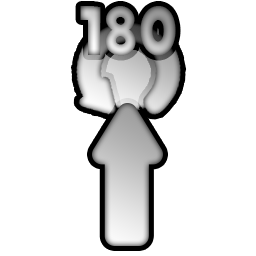
<style>
.page{position:relative;width:256px;height:256px;background:#ffffff}
.page>*{position:absolute;margin:0}
.t1{font:109.7px "Riffic-Bold";letter-spacing:0.06em;scale:0.83 1}
</style>
<div class="page">
<p class="t1" style="left:80px;top:6px;width:96px;height:50px">180</p>
</div>
